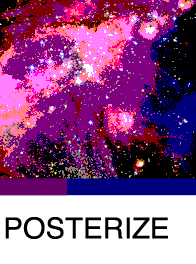
<style>
.page{position:relative;width:196px;height:264px;background:#ffffff}
.page>*{position:absolute;margin:0}
.t1{font:28.9px "Helvetica";color:#000000}
</style>
<div class="page">
<p class="t1" style="left:5px;top:217px;width:163px;height:22px">POSTERIZE</p>
</div>
